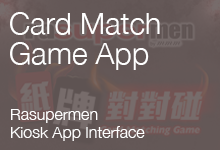
<style>
.page{position:relative;width:220px;height:150px}
.page>*{position:absolute;margin:0}
.t1{font:30px/30px "HelveticaNeue-Light";color:#ffffff}
.t2{font:16px/18px "HelveticaNeue-Light";color:#ffffff}
</style>
<div class="page">
<p class="t1" style="left:10px;top:12px;width:150px;height:58px">Card Match<br>Game App</p>
<p class="t2" style="left:11px;top:109px;width:134px;height:32px">Rasupermen<br>Kiosk App Interface</p>
</div>
